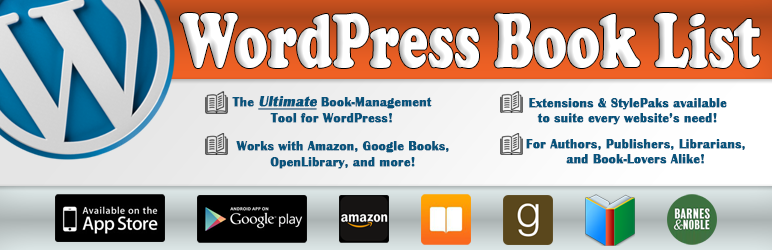
<style>
.page{position:relative;width:772px;height:250px}
.page>*{position:absolute;margin:0}
.t1{font:79.6px "CooperBlack";color:#ffffff;scale:0.69 1}
.t2{font:13px "BritannicBold";color:#09547c;font-weight:bold}
.t3{font:15px "BritannicBold";color:#09547c;font-weight:bold;font-style:italic;text-decoration:underline}
</style>
<div class="page">
<p class="t1" style="left:180px;top:13px;width:580px;height:55px">WordPress Book List</p>
<p class="t2" style="left:232px;top:96px;width:200px;height:27px;text-align:center">The <span class="t3">Ultimate</span> Book-Management<br>Tool for WordPress!</p>
<p class="t2" style="left:529px;top:98px;width:198px;height:27px;text-align:center">Extensions &amp; StylePaks available<br>to suite every website’s need!</p>
<p class="t2" style="left:236px;top:141px;width:213px;height:28px;text-align:center">Works with Amazon, Google Books,<br>OpenLibrary, and more!</p>
<p class="t2" style="left:526px;top:139px;width:219px;height:25px;text-align:center">For Authors, Publishers, Librarians,<br>and Book-Lovers Alike!</p>
</div>
